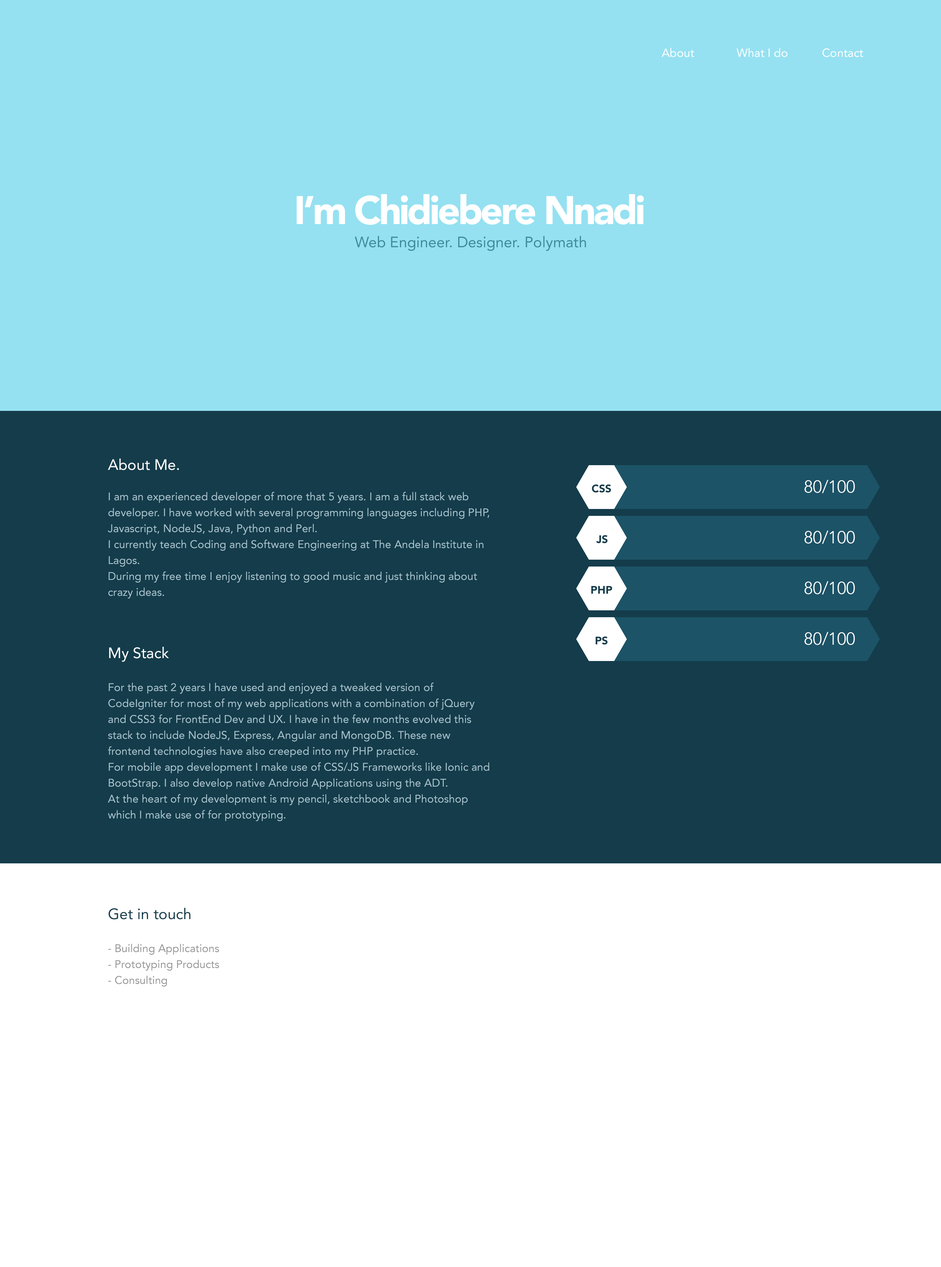
<style>
.page{position:relative;width:941px;height:1267px;background:#95e1f1}
.page>*{position:absolute;margin:0}
.t1{font:11.7px "Avenir-Roman";color:#ffffff}
.t2{font:39.6px "Avenir-Black";letter-spacing:-0.06em;color:#ffffff}
.t3{font:15px "Avenir-Roman";color:#418a99}
.t4{font:15px "Avenir-Roman";color:#ffffff}
.t5{font:10.9px "Avenir-Black";color:#143c4b}
.t6{font:17.4px "Avenir-Light";color:#ffffff}
.t7{font:11px/15.9px "Avenir-Roman";color:#abc6d0}
.t8{font:15px "Avenir-Roman";color:#143c4b}
.t9{font:11px/15.9px "Avenir-Roman";color:#939393}
</style>
<div class="page">
<p class="t1" style="left:662px;top:48px;width:32px;height:9px">About</p>
<p class="t1" style="left:737px;top:48px;width:51px;height:9px">What I do</p>
<p class="t1" style="left:822px;top:48px;width:41px;height:9px">Contact</p>
<p class="t2" style="left:296px;top:194px;width:348px;height:31px">I’m Chidiebere Nnadi</p>
<p class="t3" style="left:355px;top:236px;width:231px;height:15px">Web Engineer. Designer. Polymath</p>
<p class="t4" style="left:108px;top:458px;width:71px;height:12px">About Me.</p>
<p class="t5" style="left:592px;top:484px;width:19px;height:9px">CSS</p>
<p class="t6" style="left:805px;top:480px;width:50px;height:13px">80/100</p>
<p class="t7" style="left:108px;top:492px;width:381px;height:107px">I am an experienced developer of more that 5 years. I am a full stack web developer. I have worked with several programming languages including PHP, Javascript, NodeJS, Java, Python and Perl.<br>I currently teach Coding and Software Engineering at The Andela Institute in Lagos.<br>During my free time I enjoy listening to good music and just thinking about crazy ideas.</p>
<p class="t6" style="left:805px;top:530px;width:50px;height:14px">80/100</p>
<p class="t5" style="left:596px;top:535px;width:12px;height:8px">JS</p>
<p class="t6" style="left:805px;top:581px;width:50px;height:14px">80/100</p>
<p class="t5" style="left:591px;top:586px;width:21px;height:8px">PHP</p>
<p class="t5" style="left:595px;top:636px;width:13px;height:9px">PS</p>
<p class="t6" style="left:805px;top:632px;width:50px;height:13px">80/100</p>
<p class="t4" style="left:109px;top:647px;width:60px;height:15px">My Stack</p>
<p class="t7" style="left:108px;top:682px;width:381px;height:139px">For the past 2 years I have used and enjoyed a tweaked version of CodeIgniter for most of my web applications with a combination of jQuery and CSS3 for FrontEnd Dev and UX. I have in the few months evolved this stack to include NodeJS, Express, Angular and MongoDB. These new frontend technologies have also creeped into my PHP practice.<br>For mobile app development I make use of CSS/JS Frameworks like Ionic and BootStrap. I also develop native Android Applications using the ADT.<br>At the heart of my development is my pencil, sketchbook and Photoshop which I make use of for prototyping.</p>
<p class="t8" style="left:109px;top:908px;width:81px;height:11px">Get in touch</p>
<p class="t9" style="left:108px;top:944px;width:111px;height:43px">- Building Applications<br>- Prototyping Products<br>- Consulting</p>
</div>
